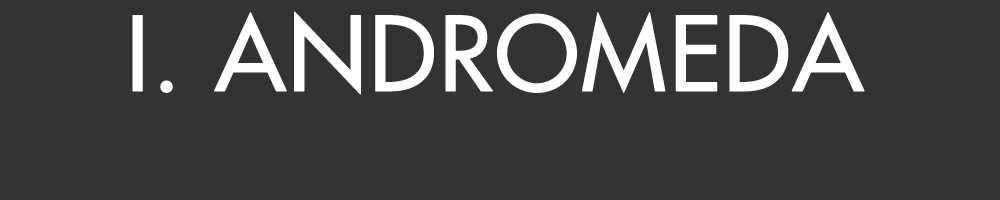
<style>
.page{position:relative;width:1000px;height:200px;background:#333333}
.page>*{position:absolute;margin:0}
.t1{font:100px "Futura";color:#ffffff;font-weight:bold}
</style>
<div class="page">
<p class="t1" style="left:132px;top:11px;width:733px;height:84px">I. ANDROMEDA</p>
</div>
